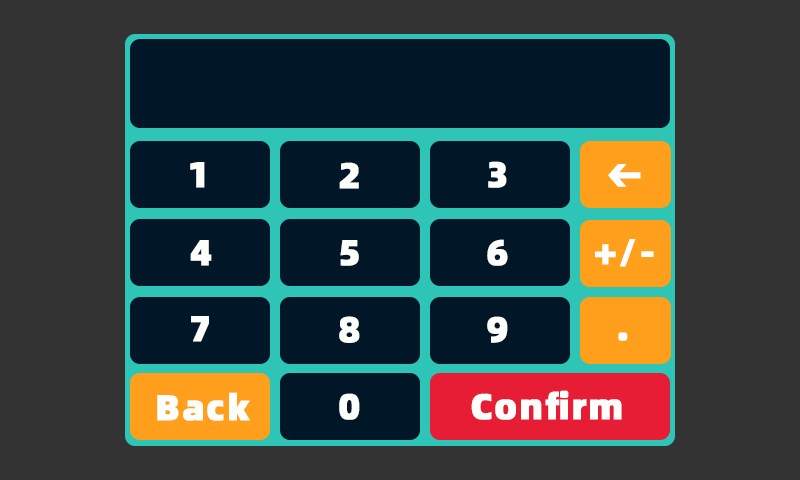
<style>
.page{position:relative;width:800px;height:480px;background:#333333}
.page>*{position:absolute;margin:0}
.t1{font:36px "Alibaba-PuHuiTi-H";letter-spacing:0.04em;color:#fdfffc;font-weight:bold}
</style>
<div class="page">
<p class="t1" style="left:488px;top:161px;width:19px;height:27px">3</p>
<p class="t1" style="left:190px;top:162px;width:15px;height:26px">1</p>
<p class="t1" style="left:339px;top:162px;width:20px;height:27px">2</p>
<p class="t1" style="left:608px;top:164px;width:33px;height:23px">←</p>
<p class="t1" style="left:190px;top:240px;width:22px;height:26px">4</p>
<p class="t1" style="left:340px;top:240px;width:19px;height:26px">5</p>
<p class="t1" style="left:487px;top:239px;width:21px;height:27px">6</p>
<p class="t1" style="left:595px;top:239px;width:59px;height:28px">+/-</p>
<p class="t1" style="left:191px;top:316px;width:18px;height:26px">7</p>
<p class="t1" style="left:339px;top:316px;width:21px;height:27px">8</p>
<p class="t1" style="left:487px;top:316px;width:21px;height:27px">9</p>
<p class="t1" style="left:618px;top:332px;width:10px;height:9px">.</p>
<p class="t1" style="left:471px;top:390px;width:151px;height:30px">Confirm</p>
<p class="t1" style="left:157px;top:392px;width:93px;height:29px">Back</p>
<p class="t1" style="left:339px;top:393px;width:21px;height:27px">0</p>
</div>
